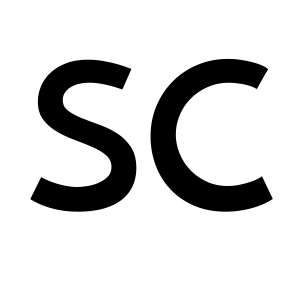
<style>
.page{position:relative;width:300px;height:300px;background:#ffffff}
.page>*{position:absolute;margin:0}
.t1{font:204.7px "JosefinSans-Bold";color:#000000}
</style>
<div class="page">
<p class="t1" style="left:30px;top:58px;width:243px;height:154px">SC</p>
</div>
